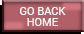
<style>
.page{position:relative;width:84px;height:34px;background:#b16067}
.page>*{position:absolute;margin:0}
.t1{font:11px/11px "Roboto-Regular";color:#ffffff}
</style>
<div class="page">
<p class="t1" style="left:20px;top:7px;width:46px;height:19px;text-align:center">GO BACK<br>HOME</p>
</div>
